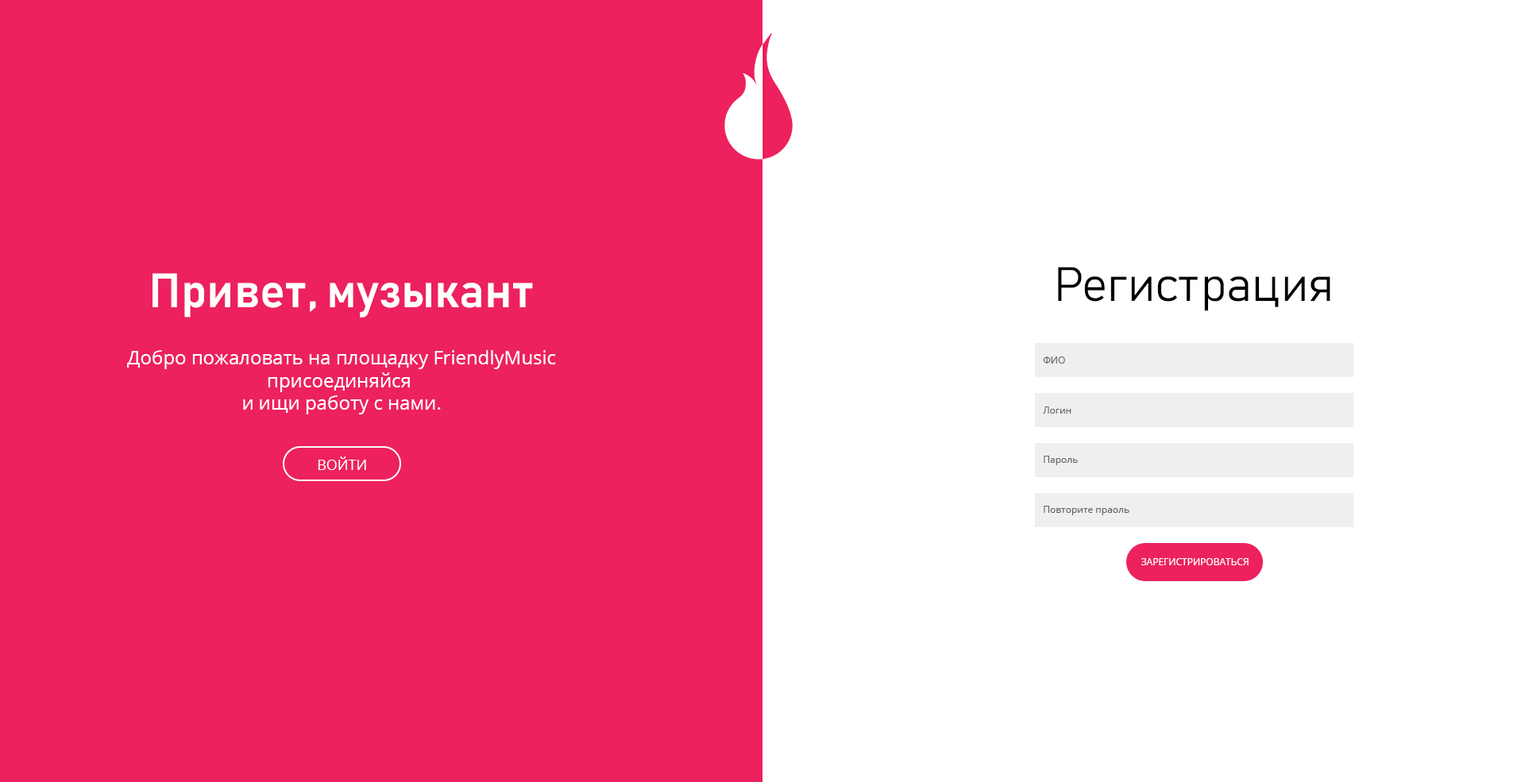
<style>
.page{position:relative;width:1525px;height:782px;background:#ed215e}
.page>*{position:absolute;margin:0}
.t1{font:47.6px "Bahnschrift-Light";color:#000000}
.t2{font:47.6px "Bahnschrift-SemiBold";color:#ffffff}
.t3{font:19.1px "OpenSans";color:#ffffff}
.t4{font:9.5px "OpenSans";color:#656565}
.t5{font:14.3px "OpenSans";color:#ffffff;text-transform:uppercase}
.t6{font:9.5px "OpenSans";color:#ffffff;text-transform:uppercase}
</style>
<div class="page">
<p class="t1" style="left:1058px;top:267px;width:272px;height:44px">Регистрация</p>
<p class="t2" style="left:152px;top:273px;width:381px;height:45px">Привет, музыкант</p>
<p class="t3" style="left:127px;top:350px;width:429px;height:64px;text-align:center">Добро пожаловать на площадку FriendlyMusic<br>присоединяйся <br>и ищи работу с нами.</p>
<p class="t4" style="left:1043px;top:357px;width:22px;height:7px">ФИО</p>
<p class="t4" style="left:1043px;top:407px;width:28px;height:7px">Логин</p>
<p class="t5" style="left:318px;top:457px;width:48px;height:13px">Войти</p>
<p class="t4" style="left:1043px;top:456px;width:35px;height:9px">Пароль</p>
<p class="t4" style="left:1043px;top:506px;width:86px;height:9px">Повторите праоль</p>
<p class="t6" style="left:1141px;top:558px;width:107px;height:7px">Зарегистрироваться</p>
</div>
